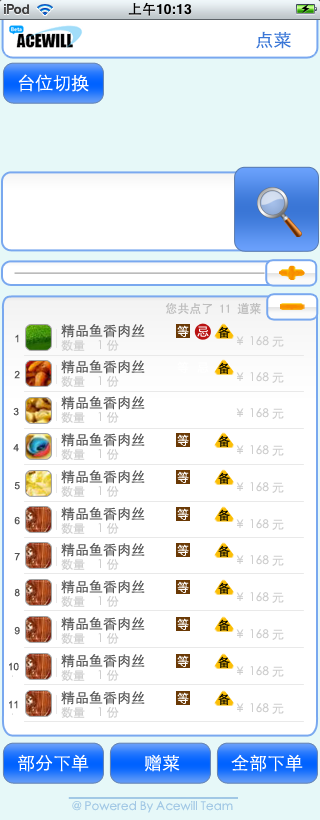
<style>
.page{position:relative;width:320px;height:820px;background:#ffffff}
.page>*{position:absolute;margin:0}
.t1{font:18px "STXihei";color:#3b77d7}
.t2{font:18px "STXihei";color:#ffffff}
.t3{font:12px "SimHei";color:#bebebe}
.t4{font:14px "STXihei";color:#545454}
.t5{font:12px "STXihei";color:#ffffff}
.t6{font:12px "STXihei";color:#000000}
.t7{font:12px "STXihei";color:#cecece}
.t8{font:12px "STXihei";color:#a2c8e5}
</style>
<div class="page">
<p class="t1" style="left:256px;top:31px;width:35px;height:18px">点菜</p>
<p class="t2" style="left:18px;top:74px;width:71px;height:18px">台位切换</p>
<p class="t3" style="left:165px;top:303px;width:96px;height:12px">您共点了 11 道菜</p>
<p class="t4" style="left:61px;top:324px;width:84px;height:14px">精品鱼香肉丝</p>
<p class="t5" style="left:177px;top:325px;width:12px;height:12px">等</p>
<p class="t5" style="left:197px;top:326px;width:12px;height:11px">忌</p>
<p class="t6" style="left:218px;top:326px;width:12px;height:12px">备</p>
<p class="t7" style="left:61px;top:339px;width:58px;height:12px">数量    1 份</p>
<p class="t7" style="left:236px;top:336px;width:48px;height:11px">￥ 168 元</p>
<p class="t4" style="left:61px;top:360px;width:84px;height:14px">精品鱼香肉丝</p>
<p class="t6" style="left:218px;top:362px;width:12px;height:12px">备</p>
<p class="t7" style="left:61px;top:375px;width:58px;height:12px">数量    1 份</p>
<p class="t7" style="left:236px;top:372px;width:48px;height:11px">￥ 168 元</p>
<p class="t4" style="left:61px;top:396px;width:84px;height:14px">精品鱼香肉丝</p>
<p class="t7" style="left:61px;top:411px;width:58px;height:12px">数量    1 份</p>
<p class="t7" style="left:236px;top:408px;width:48px;height:11px">￥ 168 元</p>
<p class="t4" style="left:61px;top:433px;width:84px;height:14px">精品鱼香肉丝</p>
<p class="t5" style="left:177px;top:434px;width:12px;height:12px">等</p>
<p class="t6" style="left:218px;top:435px;width:12px;height:12px">备</p>
<p class="t7" style="left:61px;top:448px;width:58px;height:12px">数量    1 份</p>
<p class="t7" style="left:236px;top:445px;width:48px;height:11px">￥ 168 元</p>
<p class="t4" style="left:61px;top:470px;width:84px;height:14px">精品鱼香肉丝</p>
<p class="t5" style="left:177px;top:471px;width:12px;height:12px">等</p>
<p class="t6" style="left:218px;top:472px;width:12px;height:12px">备</p>
<p class="t7" style="left:61px;top:485px;width:58px;height:12px">数量    1 份</p>
<p class="t7" style="left:236px;top:482px;width:48px;height:11px">￥ 168 元</p>
<p class="t4" style="left:61px;top:507px;width:84px;height:14px">精品鱼香肉丝</p>
<p class="t5" style="left:177px;top:508px;width:12px;height:12px">等</p>
<p class="t6" style="left:218px;top:509px;width:12px;height:12px">备</p>
<p class="t7" style="left:236px;top:519px;width:48px;height:11px">￥ 168 元</p>
<p class="t7" style="left:61px;top:522px;width:58px;height:12px">数量    1 份</p>
<p class="t4" style="left:61px;top:543px;width:84px;height:14px">精品鱼香肉丝</p>
<p class="t5" style="left:177px;top:544px;width:12px;height:12px">等</p>
<p class="t6" style="left:218px;top:545px;width:12px;height:12px">备</p>
<p class="t7" style="left:61px;top:558px;width:58px;height:12px">数量    1 份</p>
<p class="t7" style="left:236px;top:555px;width:48px;height:11px">￥ 168 元</p>
<p class="t4" style="left:61px;top:580px;width:84px;height:14px">精品鱼香肉丝</p>
<p class="t5" style="left:177px;top:581px;width:12px;height:12px">等</p>
<p class="t6" style="left:218px;top:582px;width:12px;height:12px">备</p>
<p class="t7" style="left:236px;top:592px;width:48px;height:11px">￥ 168 元</p>
<p class="t7" style="left:61px;top:595px;width:58px;height:12px">数量    1 份</p>
<p class="t4" style="left:61px;top:617px;width:84px;height:14px">精品鱼香肉丝</p>
<p class="t5" style="left:177px;top:618px;width:12px;height:12px">等</p>
<p class="t6" style="left:218px;top:619px;width:12px;height:12px">备</p>
<p class="t7" style="left:236px;top:629px;width:48px;height:11px">￥ 168 元</p>
<p class="t7" style="left:61px;top:632px;width:58px;height:12px">数量    1 份</p>
<p class="t4" style="left:61px;top:654px;width:84px;height:14px">精品鱼香肉丝</p>
<p class="t5" style="left:177px;top:655px;width:12px;height:12px">等</p>
<p class="t6" style="left:218px;top:656px;width:12px;height:12px">备</p>
<p class="t7" style="left:61px;top:669px;width:58px;height:12px">数量    1 份</p>
<p class="t7" style="left:236px;top:666px;width:48px;height:11px">￥ 168 元</p>
<p class="t4" style="left:61px;top:691px;width:84px;height:14px">精品鱼香肉丝</p>
<p class="t5" style="left:177px;top:692px;width:12px;height:12px">等</p>
<p class="t6" style="left:218px;top:693px;width:12px;height:12px">备</p>
<p class="t7" style="left:61px;top:706px;width:58px;height:12px">数量    1 份</p>
<p class="t7" style="left:236px;top:703px;width:48px;height:11px">￥ 168 元</p>
<p class="t2" style="left:18px;top:754px;width:71px;height:18px">部分下单</p>
<p class="t2" style="left:145px;top:754px;width:35px;height:18px">赠菜</p>
<p class="t2" style="left:231px;top:754px;width:72px;height:18px">全部下单</p>
<p class="t8" style="left:72px;top:801px;width:161px;height:12px">@ Powered By Acewill Team</p>
</div>
